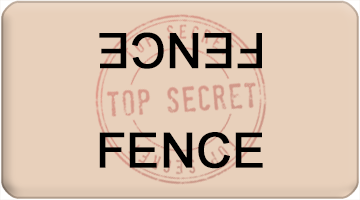
<style>
.page{position:relative;width:360px;height:200px;background:#e8d0bb}
.page>*{position:absolute;margin:0}
.t1{font:48px "ArialMT";color:#000000;font-weight:bold}
</style>
<div class="page">
<p class="t1" style="left:99px;top:32px;width:163px;height:37px;rotate:180deg">FENCE</p>
<p class="t1" style="left:99px;top:132px;width:164px;height:37px">FENCE</p>
</div>
